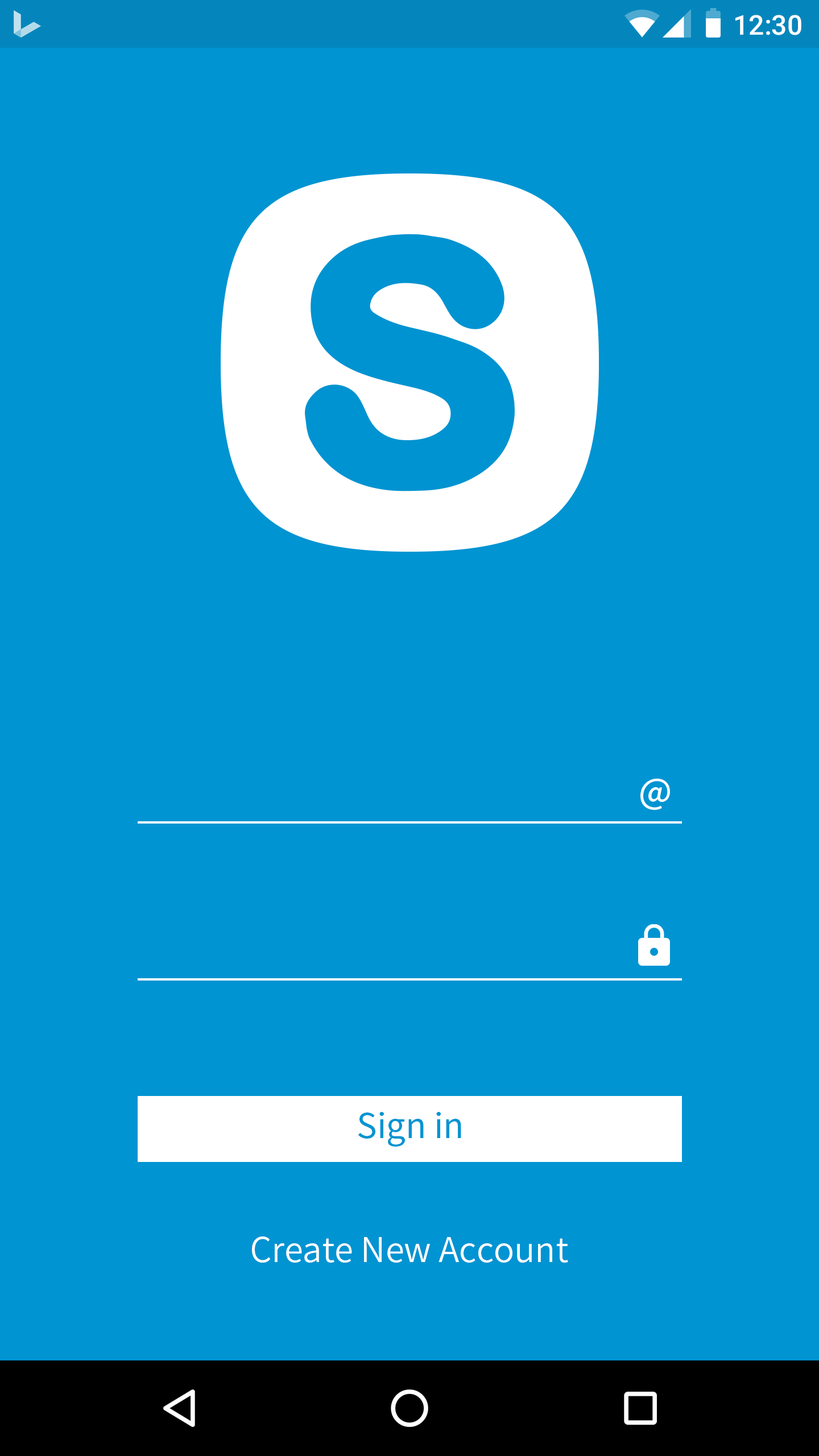
<style>
.page{position:relative;width:819px;height:1456px;background:#0094d2}
.page>*{position:absolute;margin:0}
.t1{font:27.3px "Roboto-Medium";color:#ffffff}
.t2{font:34.1px "NotoSansCJKkr-Regular";color:#0094d2}
.t3{font:34.1px "NotoSansCJKkr-DemiLight";color:#ffffff}
</style>
<div class="page">
<p class="t1" style="left:735px;top:15px;width:66px;height:20px">12:30</p>
<p class="t2" style="left:358px;top:1112px;width:103px;height:35px">Sign in</p>
<p class="t3" style="left:252px;top:1236px;width:316px;height:27px">Create New Account</p>
</div>
